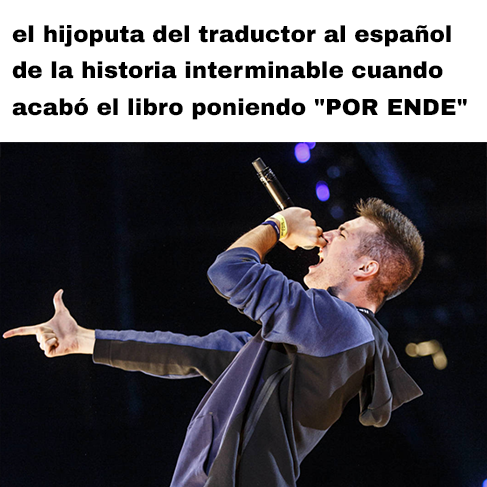
<style>
.page{position:relative;width:487px;height:487px;background:#ffffff}
.page>*{position:absolute;margin:0}
.t1{font:23px "ArchivoBlack-Regular";color:#000000}
</style>
<div class="page">
<p class="t1" style="left:12px;top:25px;width:455px;height:95px">el hijoputa del traductor al español<br>de la historia interminable cuando<br>acabó el libro poniendo "POR ENDE"</p>
</div>
